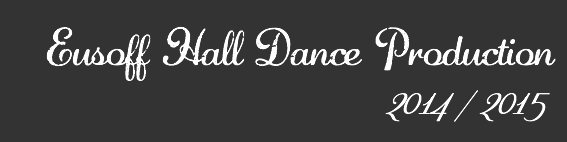
<style>
.page{position:relative;width:567px;height:142px;background:#333333}
.page>*{position:absolute;margin:0}
.t1{font:48px "Diamond-Dust";color:#ffffff}
.t2{font:46.7px "RespectiveSlanted";color:#ffffff}
</style>
<div class="page">
<p class="t1" style="left:46px;top:26px;width:510px;height:55px">Eusoff Hall Dance Production</p>
<p class="t2" style="left:385px;top:90px;width:165px;height:32px">2014 / 2015</p>
</div>
